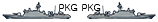
<style>
.page{position:relative;width:158px;height:22px;background:#ffffff}
.page>*{position:absolute;margin:0}
.t1{font:9.3px "Gulim";color:#000000}
</style>
<div class="page">
<p class="t1" style="left:59px;top:4px;width:19px;height:7px">PKG</p>
<p class="t1" style="left:82px;top:4px;width:19px;height:7px">PKG</p>
</div>
